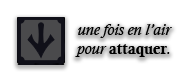
<style>
.page{position:relative;width:190px;height:81px;background:#ffffff}
.page>*{position:absolute;margin:0}
.t1{font:16px "CalistoMT-Italic";color:#000000}
.t2{font:16px "CalisMTBol";color:#000000}
</style>
<div class="page">
<p class="t1" style="left:75px;top:24px;width:97px;height:33px;text-align:center">une fois en l’air <br>pour <span class="t2">attaquer</span>.</p>
</div>
